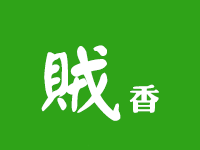
<style>
.page{position:relative;width:200px;height:150px;background:#2fa318}
.page>*{position:absolute;margin:0}
.t1{font:82px "¾­µä·±ÑÕÌå Regular";color:#ffffff}
.t2{font:31.2px "¾­µä·±·ÂÔ² Regular";color:#ffffff}
</style>
<div class="page">
<p class="t1" style="left:41px;top:45px;width:80px;height:76px">贼</p>
<p class="t2" style="left:129px;top:84px;width:30px;height:29px">香</p>
</div>
